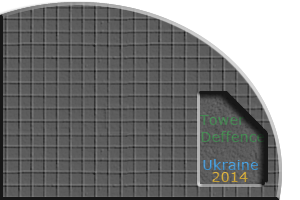
<style>
.page{position:relative;width:300px;height:200px}
.page>*{position:absolute;margin:0}
.t1{font:14px "Verdana";letter-spacing:0.025em;color:#488351}
.t2{font:14px "Verdana";letter-spacing:0.025em;color:#4e97cd}
.t3{font:14px "Verdana";letter-spacing:0.025em;color:#c4a239}
</style>
<div class="page">
<p class="t1" style="left:199px;top:115px;width:66px;height:27px;text-align:center">Tower <br>   Deffence</p>
<p class="t2" style="left:203px;top:159px;width:55px;height:11px">Ukraine</p>
<p class="t3" style="left:212px;top:172px;width:36px;height:10px">2014</p>
</div>
